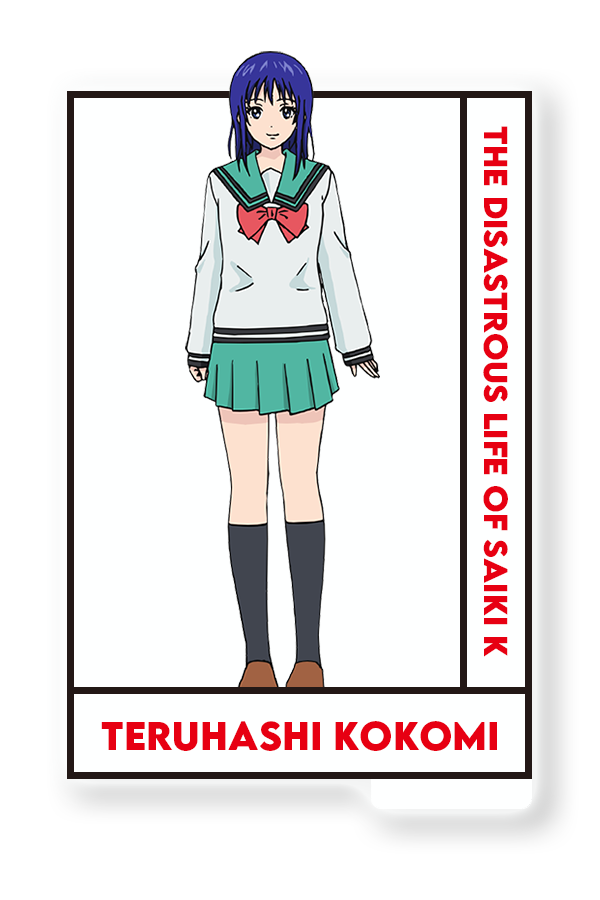
<style>
.page{position:relative;width:600px;height:900px;background:#feffff}
.page>*{position:absolute;margin:0}
.t1{font:29.6px "LEMONMILK-Bold";color:#e70012}
.t2{font:35.7px "LEMONMILK-Bold";color:#e70012}
</style>
<div class="page">
<p class="t1" style="left:483px;top:126px;width:25px;height:531px;rotate:90deg">THE disastrous Life of saiki K</p>
<p class="t2" style="left:101px;top:721px;width:396px;height:30px">Teruhashi KOKOMI</p>
</div>
